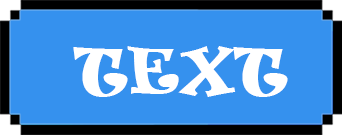
<style>
.page{position:relative;width:342px;height:135px;background:#3591ee}
.page>*{position:absolute;margin:0}
.t1{font:60px "Ravie";color:#ffffff}
</style>
<div class="page">
<p class="t1" style="left:73px;top:46px;width:215px;height:51px">TEXT</p>
</div>
